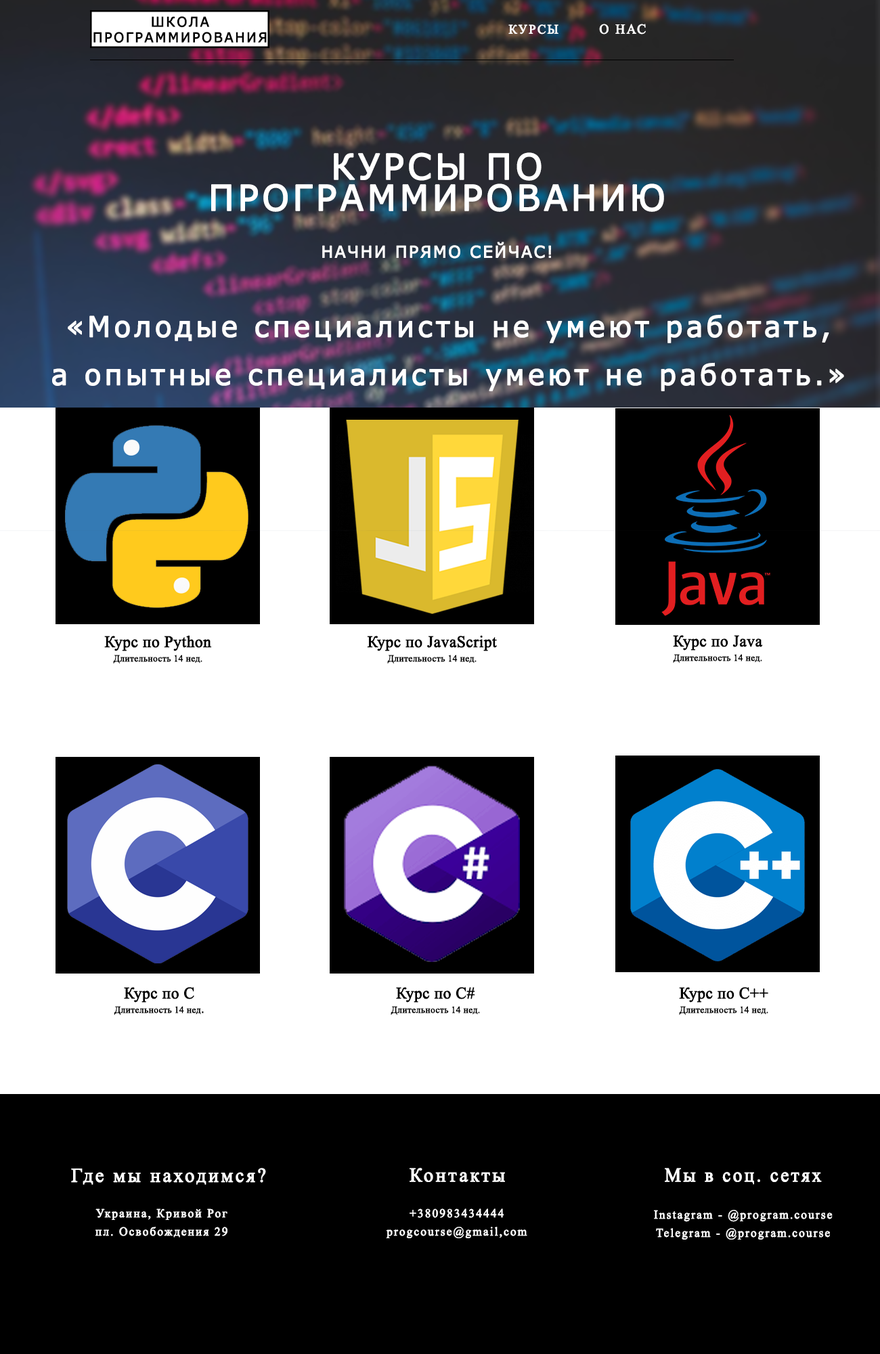
<style>
.page{position:relative;width:880px;height:1354px;background:#ffffff}
.page>*{position:absolute;margin:0}
.t1{font:12.9px "TimesNewRomanPSMT";letter-spacing:0.1em;color:#ffffff;font-weight:bold;scale:0.97 1}
.t2{font:13.5px "TimesNewRomanPSMT";letter-spacing:0.1em;color:#ffffff;font-weight:bold;scale:0.97 1}
.t3{font:35.4px/31.1px "Verdana";letter-spacing:0.08em;color:#ffffff;font-weight:bold}
.t4{font:16.3px/47.1px "Verdana";letter-spacing:0.08em;color:#ffffff;font-weight:bold}
.t5{font:9.5px/14.4px "TimesNewRomanPSMT";color:#000000;font-weight:bold;scale:0.97 1}
.t6{font:16.3px/26.6px "TimesNewRomanPSMT";color:#000000;font-weight:bold;scale:0.97 1}
.t7{font:9.5px/14.4px "Verdana";color:#000000;font-weight:bold;scale:0.97 1}
.t8{font:19.6px "TimesNewRomanPSMT";letter-spacing:0.1em;color:#ffffff;font-weight:bold;scale:0.97 1}
.t9{font:19.6px "TimesNewRomanPSMT";letter-spacing:0.1em;color:#ffffff;font-weight:bold;scale:0.93 1}
.t10{font:12px/18.2px "TimesNewRomanPSMT";letter-spacing:0.1em;color:#ffffff;font-weight:bold;scale:0.97 1}
</style>
<div class="page">
<p class="t1" style="left:509px;top:24px;width:50px;height:11px">КУРСЫ</p>
<p class="t2" style="left:599px;top:24px;width:47px;height:11px">О НАС</p>
<p class="t3" style="left:211px;top:152px;width:453px;height:107px;text-align:center">КУРСЫ ПО<br>ПРОГРАММИРОВАНИЮ<br><span class="t4">НАЧНИ ПРЯМО СЕЙЧАС!</span></p>
<p class="t5" style="left:104px;top:635px;width:108px;height:29px;text-align:center"><span class="t6">Курс по Python<br></span>Длительность 14 нед.</p>
<p class="t5" style="left:367px;top:635px;width:130px;height:29px;text-align:center"><span class="t6">Курс по JavaScript<br></span>Длительность 14 нед.</p>
<p class="t5" style="left:673px;top:635px;width:90px;height:29px;text-align:center"><span class="t6">Курс по Java<br></span>Длительность 14 нед.</p>
<p class="t5" style="left:114px;top:987px;width:90px;height:29px;text-align:center"><span class="t6">Курс по C<br></span>Длительность 14 нед<span class="t7">.</span></p>
<p class="t5" style="left:391px;top:987px;width:89px;height:29px;text-align:center"><span class="t6">Курс по C#<br></span>Длительность 14 нед.</p>
<p class="t5" style="left:679px;top:987px;width:90px;height:29px;text-align:center"><span class="t6">Курс по C++<br></span>Длительность 14 нед.</p>
<p class="t8" style="left:71px;top:1168px;width:195px;height:17px">Где мы находимся?</p>
<p class="t8" style="left:410px;top:1168px;width:95px;height:14px">Контакты</p>
<p class="t9" style="left:665px;top:1168px;width:157px;height:17px">Мы в соц. сетях</p>
<p class="t10" style="left:95px;top:1209px;width:133px;height:29px;text-align:center">Украина, Кривой Рог<br>пл. Освобождения 29</p>
<p class="t10" style="left:386px;top:1209px;width:142px;height:30px;text-align:center">+380983434444<br>progcourse@gmail,com</p>
<p class="t10" style="left:654px;top:1210px;width:179px;height:30px;text-align:center">Instagram - @program.course<br>Telegram - @program.course</p>
</div>
